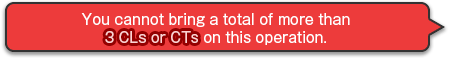
<style>
.page{position:relative;width:450px;height:58px;background:#ed3b3b}
.page>*{position:absolute;margin:0}
.t1{font:14px/18px "GothicMB101Pro-Regular";color:#ffffff}
.t2{font:14px/18px "GothicMB101Pro-Regular";color:#ffd3d3}
</style>
<div class="page">
<p class="t1" style="left:81px;top:13px;width:269px;height:32px;text-align:center">You cannot bring a total of more than<br><span class="t2">3 CLs or CTs </span>on this operation.</p>
<p class="t1" style="left:81px;top:13px;width:269px;height:32px;text-align:center">You cannot bring a total of more than<br><span class="t2">3 CLs or CTs </span>on this operation.</p>
</div>
